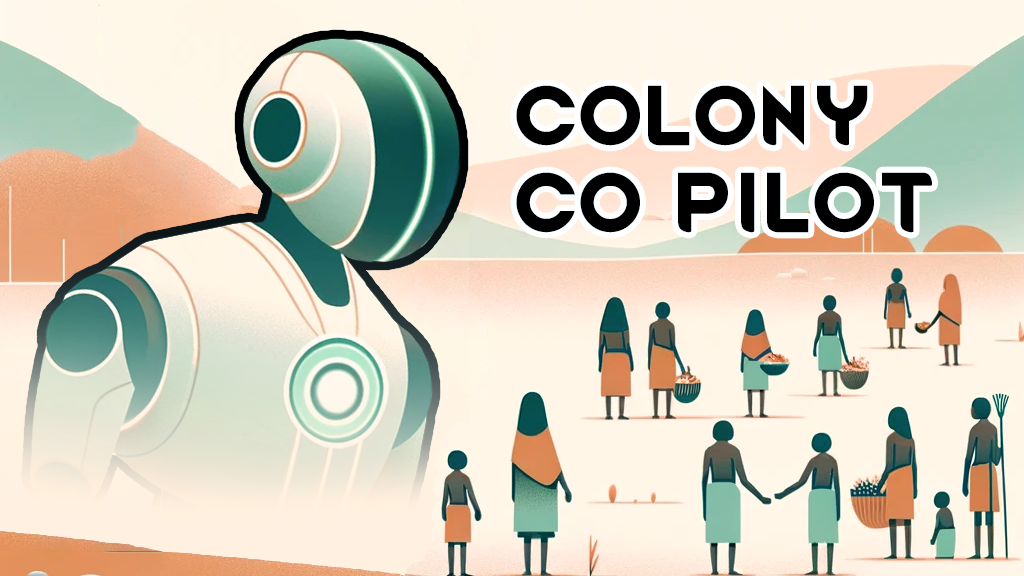
<style>
.page{position:relative;width:1024px;height:576px}
.page>*{position:absolute;margin:0}
.t1{font:72px "RimWordFont";color:#000000}
</style>
<div class="page">
<p class="t1" style="left:516px;top:85px;width:416px;height:148px">Colony<br>Co pilot</p>
</div>
